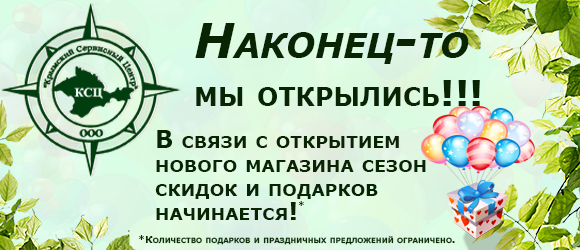
<style>
.page{position:relative;width:580px;height:250px}
.page>*{position:absolute;margin:0}
.t1{font:36px/48px "Verdana-Bold";color:#082403;font-variant:small-caps}
.t2{font:48px/48px "Verdana-BoldItalic";color:#082403;font-variant:small-caps}
.t3{font:24px/24px "Verdana-Bold";color:#082403;font-variant:small-caps}
.t4{font:10px "Verdana-Bold";color:#082403;font-variant:small-caps}
.t5{font:10px "Verdana-Bold";color:#092e02;font-variant:small-caps}
</style>
<div class="page">
<p class="t1" style="left:195px;top:23px;width:285px;height:83px"><span class="t2">Наконец-то</span> <br>мы открылись!!!</p>
<p class="t3" style="left:155px;top:130px;width:271px;height:90px">В связи с открытием нового магазина сезон скидок и подарков начинается!</p>
<p class="t4" style="left:298px;top:201px;width:6px;height:5px">*</p>
<p class="t5" style="left:139px;top:235px;width:316px;height:10px">*Количество подарков и праздничных предложений ограничено.</p>
</div>
